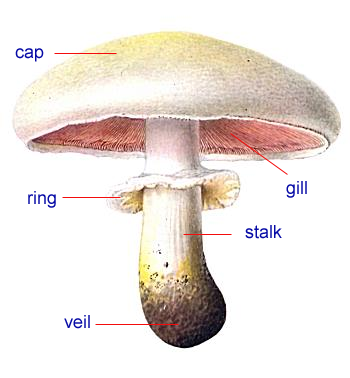
<style>
.page{position:relative;width:350px;height:378px;background:#ffffff}
.page>*{position:absolute;margin:0}
.t1{font:18px "ArialMT";color:#070ba6}
</style>
<div class="page">
<p class="t1" style="left:15px;top:48px;width:29px;height:14px">cap</p>
<p class="t1" style="left:286px;top:181px;width:21px;height:17px">gill</p>
<p class="t1" style="left:28px;top:191px;width:28px;height:17px">ring</p>
<p class="t1" style="left:245px;top:225px;width:37px;height:14px">stalk</p>
<p class="t1" style="left:64px;top:315px;width:26px;height:14px">veil</p>
</div>
